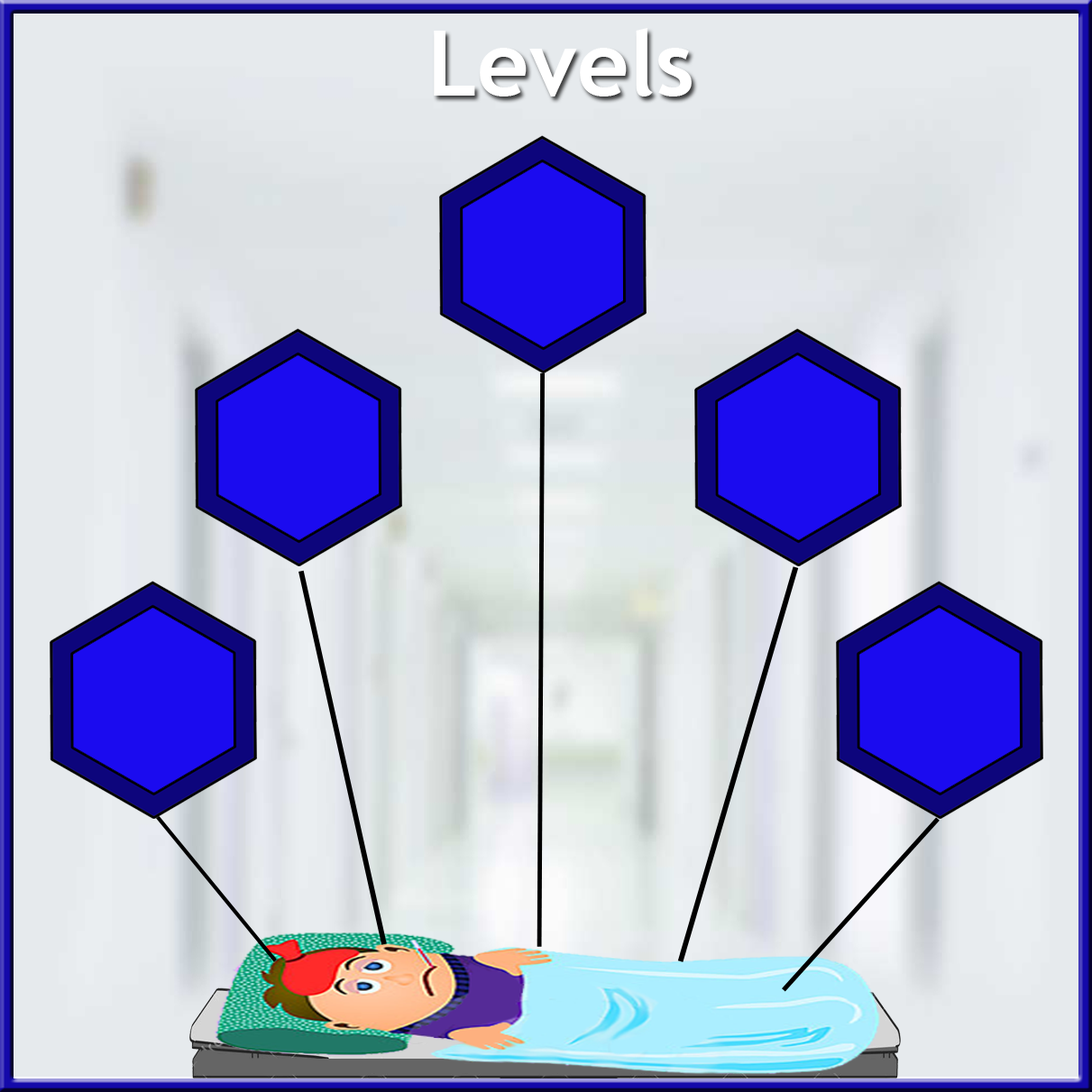
<style>
.page{position:relative;width:1092px;height:1092px}
.page>*{position:absolute;margin:0}
.t1{font:90.2px "TrebuchetMS-Bold";color:#ffffff}
</style>
<div class="page">
<p class="t1" style="left:434px;top:28px;width:258px;height:68px">Levels</p>
</div>
